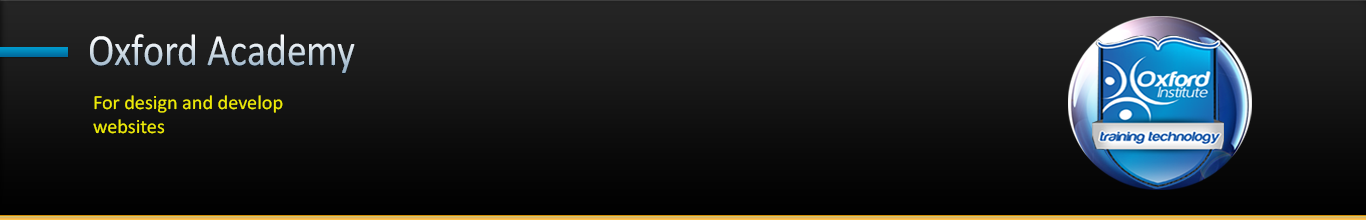
<style>
.page{position:relative;width:1366px;height:220px}
.page>*{position:absolute;margin:0}
.t1{font:45px "Calibri";scale:0.89 1}
.t2{font:20px "Calibri";color:#eeeb07}
</style>
<div class="page">
<p class="t1" style="left:90px;top:34px;width:265px;height:39px">Oxford Academy</p>
<p class="t2" style="left:93px;top:95px;width:190px;height:39px">For design and develop<br>websites</p>
</div>
